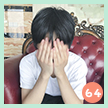
<style>
.page{position:relative;width:108px;height:108px}
.page>*{position:absolute;margin:0}
.t1{font:12px "DFPiPi-W5-WINP-BF";letter-spacing:0.1em;color:#ffffff;font-weight:bold}
</style>
<div class="page">
<p class="t1" style="left:85px;top:88px;width:17px;height:10px">64</p>
</div>
